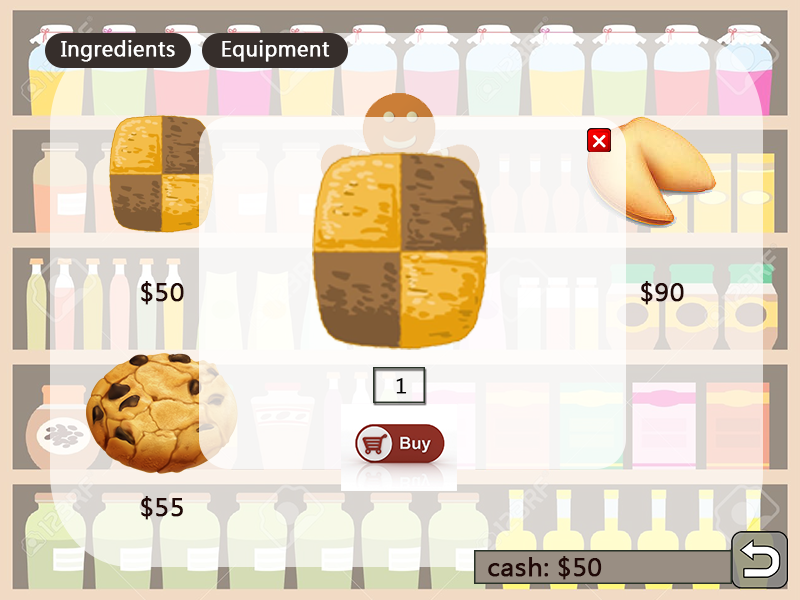
<style>
.page{position:relative;width:800px;height:600px}
.page>*{position:absolute;margin:0}
.t1{font:20px "MicrosoftJhengHeiRegular";letter-spacing:0.009em;color:#ffffff;font-weight:bold}
.t2{font:24.3px "MicrosoftJhengHeiRegular";letter-spacing:0.009em;color:#200907;font-weight:bold}
.t3{font:20px "MicrosoftJhengHeiRegular";letter-spacing:0.009em;color:#000000;font-weight:bold}
</style>
<div class="page">
<p class="t1" style="left:61px;top:40px;width:114px;height:22px">Ingredients</p>
<p class="t1" style="left:222px;top:40px;width:108px;height:22px">Equipment</p>
<p class="t2" style="left:141px;top:281px;width:43px;height:24px">$50</p>
<p class="t2" style="left:641px;top:281px;width:43px;height:24px">$90</p>
<p class="t3" style="left:396px;top:378px;width:11px;height:16px">1</p>
<p class="t2" style="left:141px;top:496px;width:42px;height:24px">$55</p>
<p class="t2" style="left:488px;top:556px;width:114px;height:24px">cash: $50</p>
</div>
